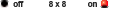
<style>
.page{position:relative;width:118px;height:8px;background:#ffffff}
.page>*{position:absolute;margin:0}
.t1{font:8px "Arial-BoldMT";letter-spacing:-0.01em;color:#292929}
</style>
<div class="page">
<p class="t1" style="left:13px;top:1px;width:84px;height:6px">off            8 x 8          on</p>
</div>
